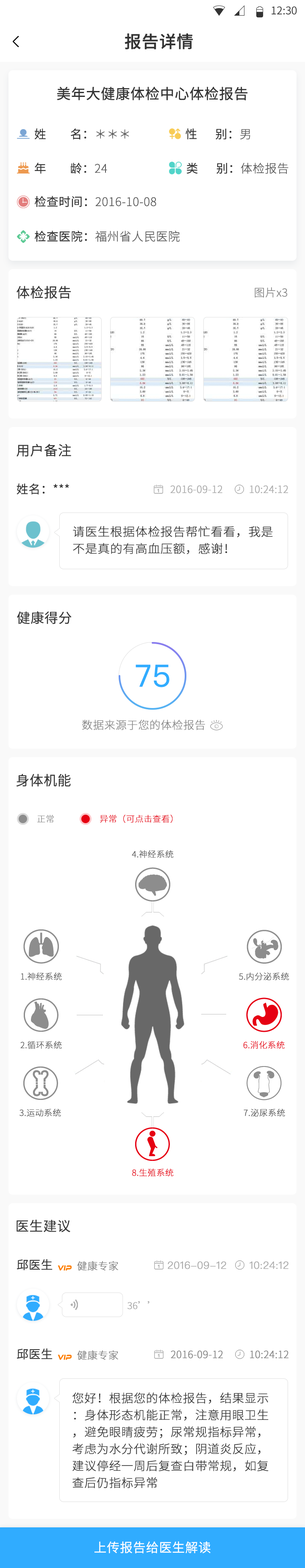
<style>
.page{position:relative;width:305px;height:1568px;background:#ffffff}
.page>*{position:absolute;margin:0}
.t1{font:10.7px "SourceHanSansCN-Normal";color:#333333}
.t2{font:16.9px "SourceHanSansCN-Medium";color:#333333;font-weight:bold}
.t3{font:14.4px "SourceHanSansCN-Regular";color:#333333;font-weight:bold}
.t4{font:11.8px "SourceHanSansCN-Normal";color:#333333;font-weight:bold}
.t5{font:11.8px "SourceHanSansCN-Light";color:#575757;font-weight:bold}
.t6{font:13.5px "SourceHanSansCN-Normal";color:#333333;font-weight:bold}
.t7{font:11px "SourceHanSansCN-Light";color:#858585;font-weight:bold}
.t8{font:10.2px "SourceHanSansCN-Light";color:#ababab;font-weight:bold}
.t9{font:11.8px/16.9px "SourceHanSansCN-Light";color:#333333;font-weight:bold;scale:1.03 1}
.t10{font:30.5px "PingFangSC-Regular";color:#30acff;font-weight:bold}
.t11{font:8.5px "SourceHanSansCN-Light";color:#8d8d8d;font-weight:bold}
.t12{font:8.5px "SourceHanSansCN-Light";color:#e60012;font-weight:bold}
.t13{font:8.5px "SourceHanSansCN-Light";color:#575757;font-weight:bold}
.t14{font:10.2px "SourceHanSansCN-Light";color:#858585;font-weight:bold}
.t15{font:10.2px "PingFangSC-Light";color:#ababab;font-weight:bold}
.t16{font:9.3px "SourceHanSansCN-Light";color:#ababab;font-weight:bold}
.t17{font:11.8px/16.9px "SourceHanSansCN-Light";color:#333333;font-weight:bold}
.t18{font:12.7px "SourceHanSansCN-Normal";color:#ffffff;font-weight:bold}
</style>
<div class="page">
<p class="t1" style="left:271px;top:6px;width:26px;height:9px">12:30</p>
<p class="t2" style="left:124px;top:33px;width:69px;height:17px">报告详情</p>
<p class="t3" style="left:57px;top:87px;width:191px;height:13px">美年大健康体检中心体检报告</p>
<p class="t4" style="left:34px;top:128px;width:95px;height:12px">姓        名：<span class="t5">＊＊＊</span></p>
<p class="t4" style="left:185px;top:128px;width:65px;height:12px">性      别：<span class="t5">男</span></p>
<p class="t4" style="left:35px;top:163px;width:72px;height:11px">年        龄：<span class="t5">24</span></p>
<p class="t4" style="left:186px;top:163px;width:102px;height:11px">类      别：<span class="t5">体检报告</span></p>
<p class="t5" style="left:35px;top:196px;width:121px;height:11px"><span class="t4">检查时间：</span>2016-10-08</p>
<p class="t5" style="left:35px;top:231px;width:144px;height:11px"><span class="t4">检查医院：</span>福州省人民医院</p>
<p class="t6" style="left:17px;top:286px;width:54px;height:13px">体检报告</p>
<p class="t7" style="left:254px;top:287px;width:33px;height:11px">图片x3</p>
<p class="t6" style="left:17px;top:444px;width:54px;height:13px">用户备注</p>
<p class="t4" style="left:17px;top:483px;width:52px;height:12px">姓名：***</p>
<p class="t8" style="left:170px;top:485px;width:52px;height:8px">2016-09-12</p>
<p class="t8" style="left:249px;top:485px;width:39px;height:8px">10:24:12</p>
<p class="t9" style="left:73px;top:526px;width:200px;height:28px">请医生根据体检报告帮忙看看，我是不是真的有高血压额，感谢！</p>
<p class="t6" style="left:17px;top:611px;width:55px;height:13px">健康得分</p>
<p class="t10" style="left:135px;top:664px;width:34px;height:23px">75</p>
<p class="t7" style="left:82px;top:719px;width:123px;height:11px">数据来源于您的体检报告</p>
<p class="t6" style="left:16px;top:774px;width:55px;height:13px">身体机能</p>
<p class="t11" style="left:37px;top:815px;width:17px;height:8px">正常</p>
<p class="t12" style="left:100px;top:815px;width:73px;height:8px">异常（可点击查看）</p>
<p class="t13" style="left:132px;top:850px;width:41px;height:8px">4.神经系统</p>
<p class="t13" style="left:21px;top:973px;width:41px;height:8px">1.神经系统</p>
<p class="t13" style="left:239px;top:973px;width:50px;height:8px">5.内分泌系统</p>
<p class="t13" style="left:20px;top:1041px;width:42px;height:8px">2.循环系统</p>
<p class="t12" style="left:243px;top:1041px;width:41px;height:8px">6.消化系统</p>
<p class="t13" style="left:19px;top:1109px;width:42px;height:8px">3.运动系统</p>
<p class="t13" style="left:243px;top:1109px;width:42px;height:7px">7.泌尿系统</p>
<p class="t12" style="left:132px;top:1168px;width:41px;height:9px">8.生殖系统</p>
<p class="t6" style="left:17px;top:1220px;width:53px;height:12px">医生建议</p>
<p class="t4" style="left:17px;top:1259px;width:35px;height:11px">邱医生</p>
<p class="t14" style="left:77px;top:1261px;width:41px;height:9px">健康专家</p>
<p class="t15" style="left:168px;top:1261px;width:58px;height:8px">2016-09-12</p>
<p class="t15" style="left:249px;top:1261px;width:39px;height:8px">10:24:12</p>
<p class="t16" style="left:127px;top:1301px;width:22px;height:8px">36’’</p>
<p class="t4" style="left:17px;top:1348px;width:35px;height:12px">邱医生</p>
<p class="t14" style="left:77px;top:1350px;width:41px;height:10px">健康专家</p>
<p class="t14" style="left:171px;top:1350px;width:52px;height:9px">2016-09-12</p>
<p class="t14" style="left:250px;top:1350px;width:38px;height:9px">10:24:12</p>
<p class="t17" style="left:72px;top:1392px;width:196px;height:96px">您好！根据您的体检报告，结果显示：身体形态机能正常，注意用眼卫生，避免眼睛疲劳；尿常规指标异常，考虑为水分代谢所致；阴道炎反应，建议停经一周后复查白带常规，如复查后仍指标异常</p>
<p class="t18" style="left:94px;top:1541px;width:116px;height:13px">上传报告给医生解读</p>
</div>
